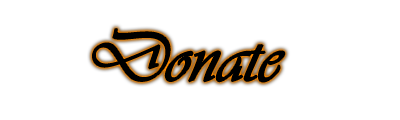
<style>
.page{position:relative;width:400px;height:120px;background:#ffffff}
.page>*{position:absolute;margin:0}
.t1{font:72px "Vivaldii";color:#000000}
</style>
<div class="page">
<p class="t1" style="left:93px;top:29px;width:192px;height:53px">Donate</p>
</div>
